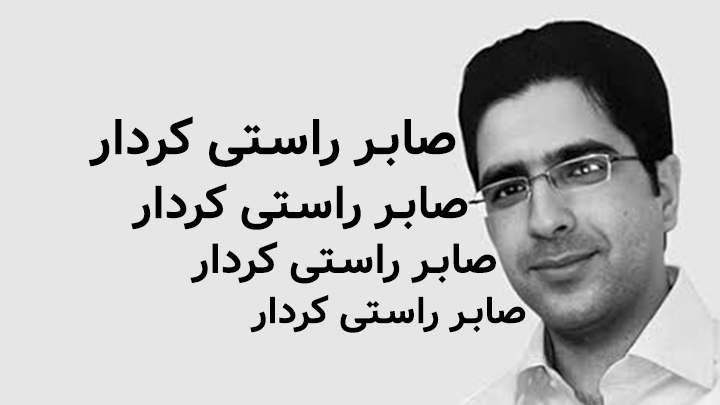
<style>
.page{position:relative;width:720px;height:405px;background:#e6e6e6}
.page>*{position:absolute;margin:0}
.t1{font:50px "Vazir-Bold";letter-spacing:0.035em;color:#000000;text-transform:uppercase}
.t2{font:45.8px "Vazir-Bold";letter-spacing:0.035em;color:#000000;text-transform:uppercase}
.t3{font:41.7px "Vazir-Bold";letter-spacing:0.035em;color:#000000;text-transform:uppercase}
.t4{font:37.5px "Vazir-Bold";letter-spacing:0.035em;color:#000000;text-transform:uppercase}
</style>
<div class="page">
<p class="t1" style="left:88px;top:116px;width:368px;height:51px">صابر راستی کردار</p>
<p class="t2" style="left:131px;top:183px;width:337px;height:47px">صابر راستی کردار</p>
<p class="t3" style="left:190px;top:241px;width:306px;height:43px">صابر راستی کردار</p>
<p class="t4" style="left:250px;top:294px;width:276px;height:39px">صابر راستی کردار</p>
</div>
